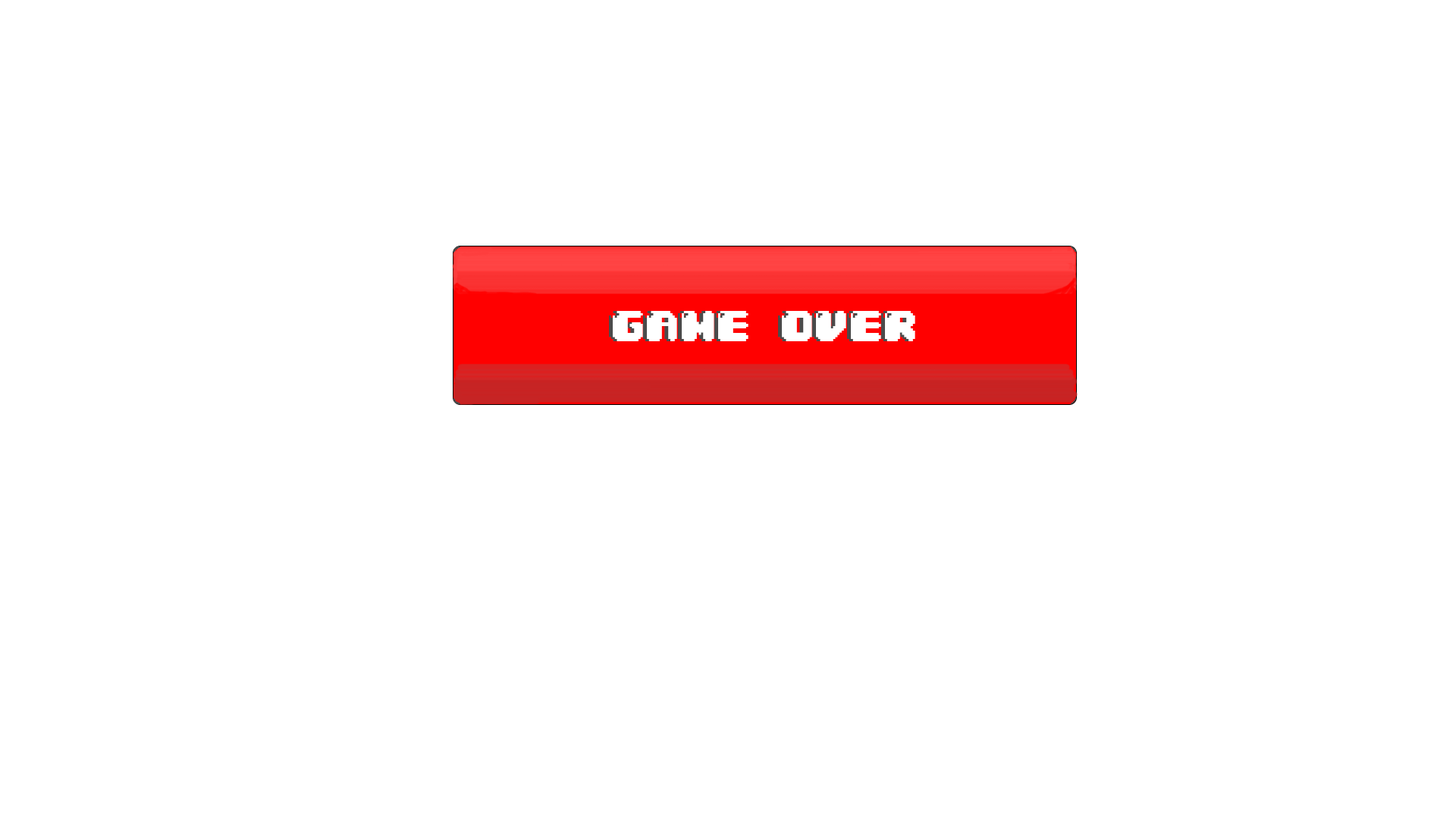
<style>
.page{position:relative;width:1456px;height:819px;background:#ffffff}
.page>*{position:absolute;margin:0}
.t1{font:36.4px "04b30";color:#ffffff}
</style>
<div class="page">
<p class="t1" style="left:609px;top:311px;width:303px;height:30px">GAME OVER</p>
<p class="t1" style="left:613px;top:311px;width:302px;height:30px">GAME OVER</p>
</div>
